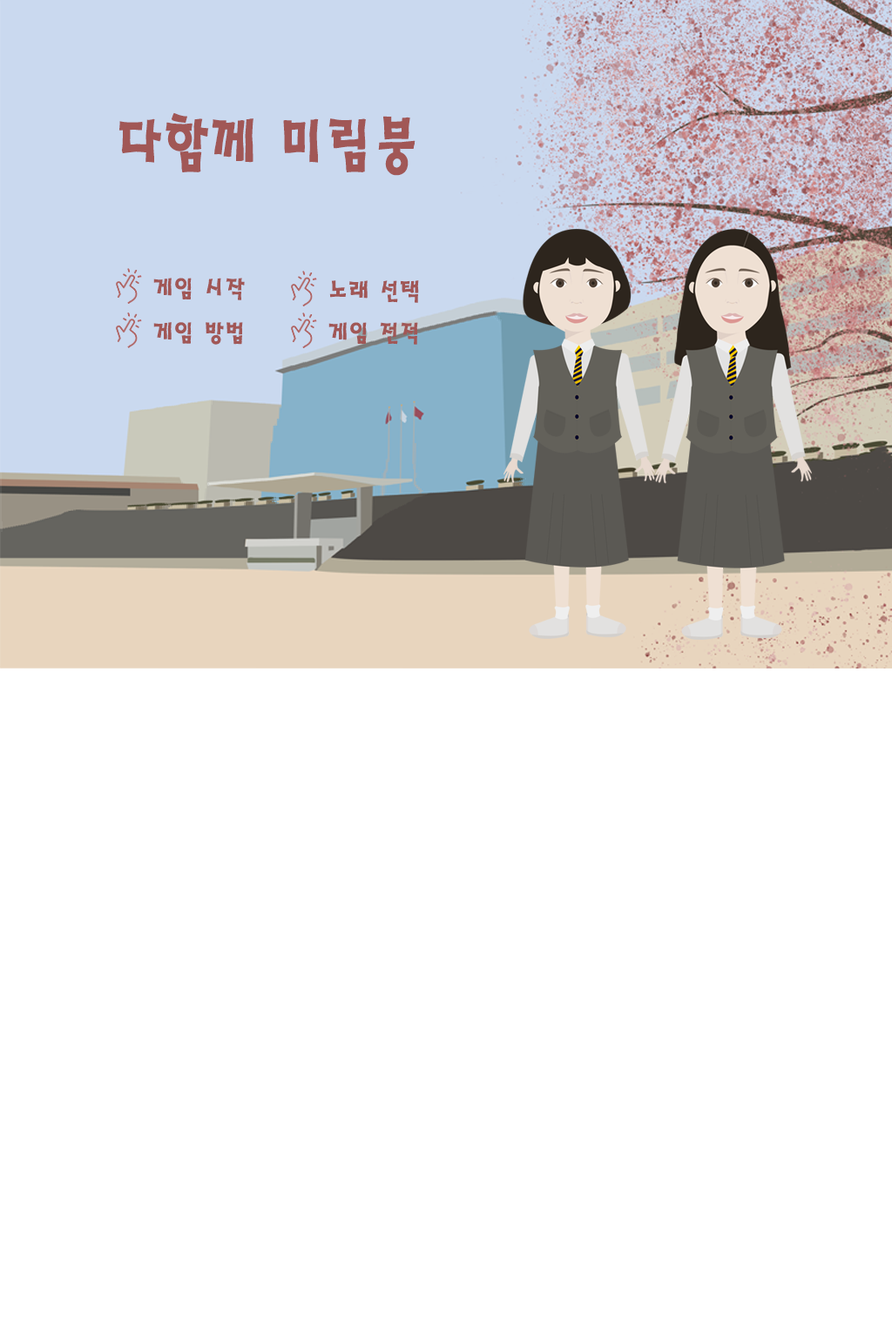
<style>
.page{position:relative;width:892px;height:1337px;background:#ffffff}
.page>*{position:absolute;margin:0}
.t1{font:65.6px "HaanSaleB";color:#a15756;scale:0.9 1}
.t2{font:26.2px "HaanSaleB";color:#a15756}
</style>
<div class="page">
<p class="t1" style="left:118px;top:112px;width:297px;height:64px">다함께 미림붕</p>
<p class="t2" style="left:153px;top:278px;width:92px;height:22px">게임 시작</p>
<p class="t2" style="left:329px;top:280px;width:90px;height:23px">노래 선택</p>
<p class="t2" style="left:153px;top:322px;width:90px;height:23px">게임 방법</p>
<p class="t2" style="left:328px;top:322px;width:90px;height:23px">게임 전적</p>
</div>
